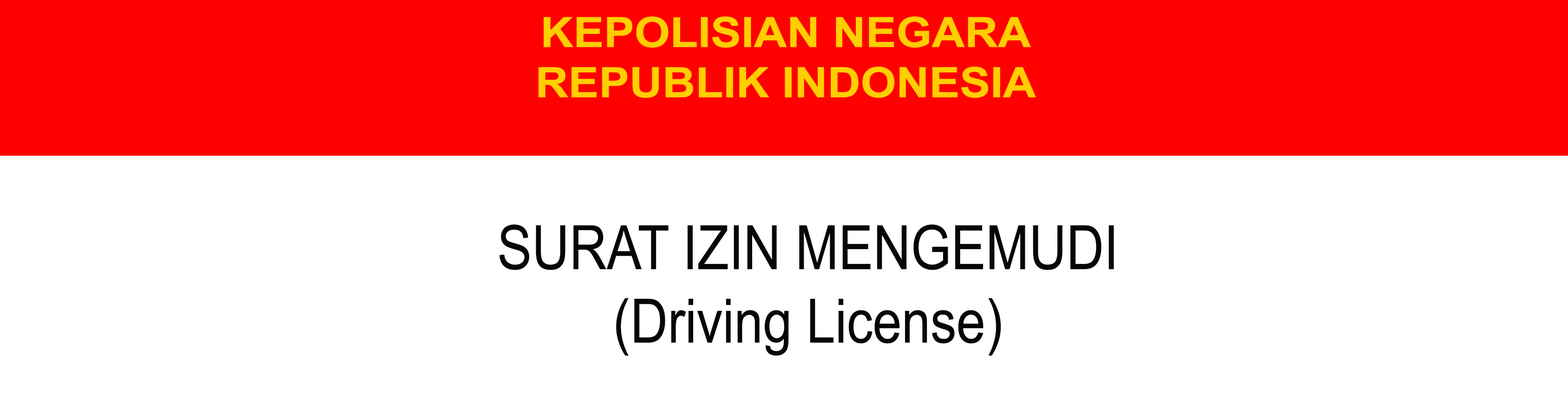
<style>
.page{position:relative;width:1568px;height:396px;background:#fffffd}
.page>*{position:absolute;margin:0}
.t1{font:41.8px "Arial-BoldMT";color:#ffce00;scale:1.09 1}
.t2{font:61.2px "ArialMT";color:#060606;scale:0.85 1}
</style>
<div class="page">
<p class="t1" style="left:538px;top:16px;width:498px;height:82px;text-align:center">KEPOLISIAN NEGARA<br>REPUBLIK INDONESIA</p>
<p class="t2" style="left:499px;top:224px;width:615px;height:131px;text-align:center">SURAT IZIN MENGEMUDI<br>(Driving License)</p>
</div>
